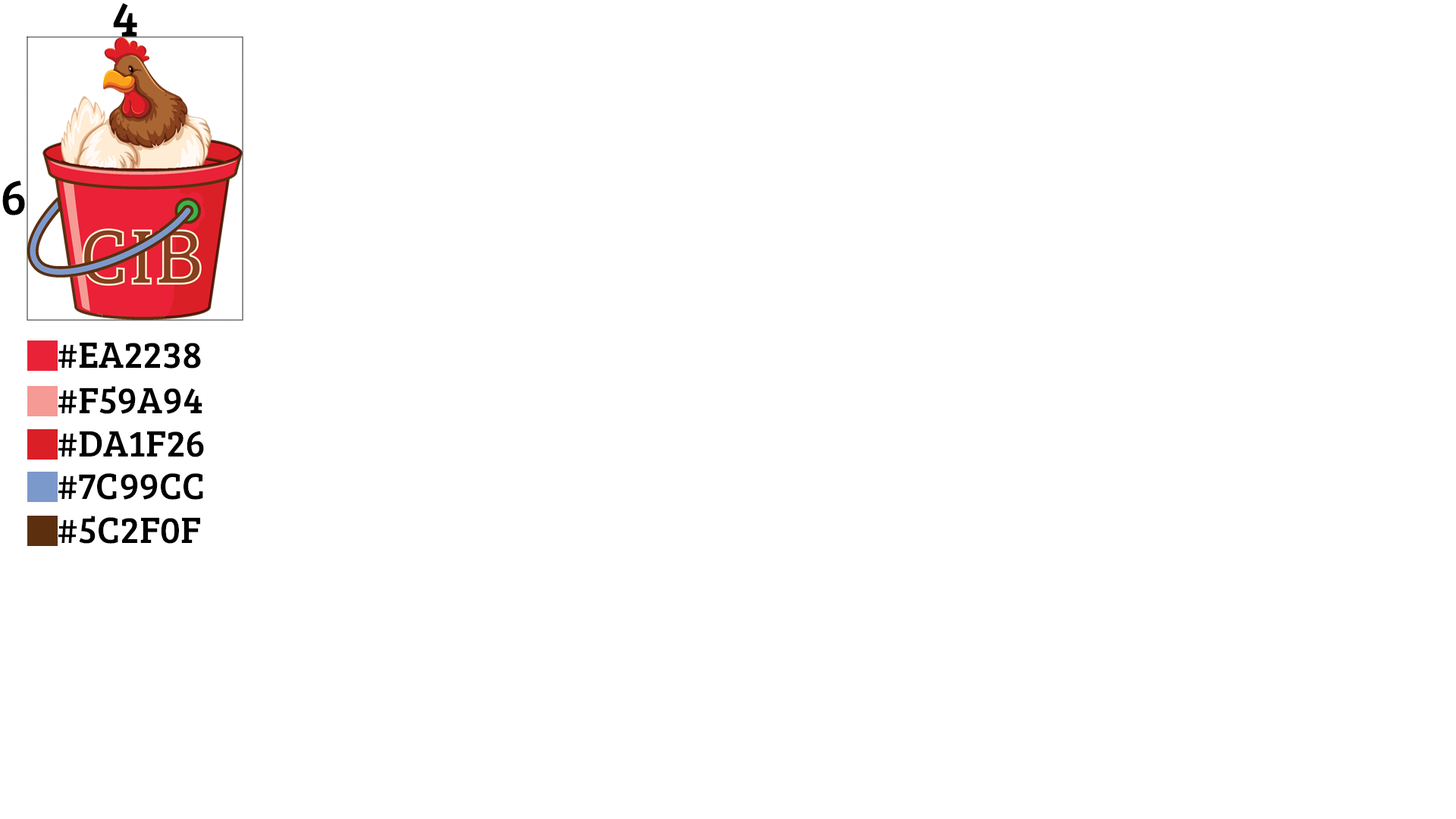
<style>
.page{position:relative;width:1456px;height:819px;background:#ffffff}
.page>*{position:absolute;margin:0}
.t1{font:50.6px "BreeSerif-Regular";color:#000000}
.t2{font:37.9px "BreeSerif-Regular";color:#000000}
</style>
<div class="page">
<p class="t1" style="left:113px;top:3px;width:24px;height:33px">4</p>
<p class="t1" style="left:2px;top:180px;width:23px;height:35px">6</p>
<p class="t2" style="left:58px;top:342px;width:143px;height:27px">#EA2238</p>
<p class="t2" style="left:58px;top:386px;width:144px;height:28px">#F59A94</p>
<p class="t2" style="left:58px;top:431px;width:146px;height:26px">#DA1F26</p>
<p class="t2" style="left:58px;top:473px;width:145px;height:27px">#7C99CC</p>
<p class="t2" style="left:58px;top:516px;width:142px;height:28px">#5C2F0F</p>
</div>
